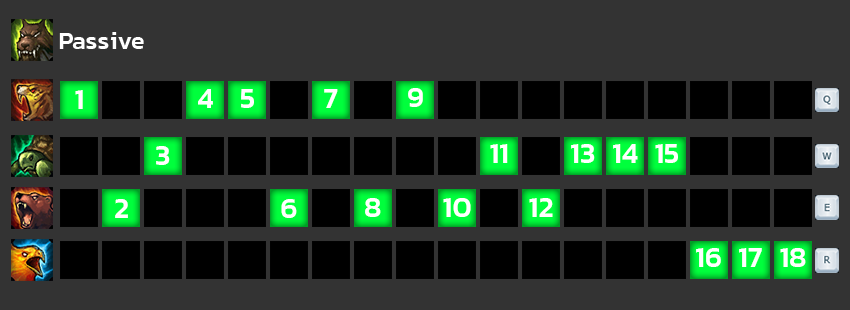
<style>
.page{position:relative;width:850px;height:310px;background:#333333}
.page>*{position:absolute;margin:0}
.t1{font:25px "Kanit-Medium";color:#ffffff}
.t2{font:29.2px "Kanit-Medium";color:#ffffff}
</style>
<div class="page">
<p class="t1" style="left:59px;top:32px;width:85px;height:17px">Passive</p>
<p class="t2" style="left:198px;top:89px;width:15px;height:19px">4</p>
<p class="t2" style="left:241px;top:89px;width:13px;height:19px">5</p>
<p class="t2" style="left:324px;top:89px;width:14px;height:19px">7</p>
<p class="t2" style="left:408px;top:88px;width:15px;height:19px">9</p>
<p class="t2" style="left:75px;top:90px;width:8px;height:19px">1</p>
<p class="t2" style="left:156px;top:146px;width:14px;height:19px">3</p>
<p class="t2" style="left:490px;top:144px;width:18px;height:19px">11</p>
<p class="t2" style="left:571px;top:144px;width:24px;height:19px">13</p>
<p class="t2" style="left:613px;top:144px;width:25px;height:19px">14</p>
<p class="t2" style="left:655px;top:144px;width:23px;height:19px">15</p>
<p class="t2" style="left:365px;top:198px;width:16px;height:19px">8</p>
<p class="t2" style="left:443px;top:198px;width:28px;height:19px">10</p>
<p class="t2" style="left:529px;top:198px;width:24px;height:19px">12</p>
<p class="t2" style="left:115px;top:199px;width:13px;height:19px">2</p>
<p class="t2" style="left:281px;top:199px;width:16px;height:19px">6</p>
<p class="t2" style="left:696px;top:248px;width:25px;height:19px">16</p>
<p class="t2" style="left:739px;top:248px;width:23px;height:19px">17</p>
<p class="t2" style="left:780px;top:248px;width:26px;height:19px">18</p>
</div>
